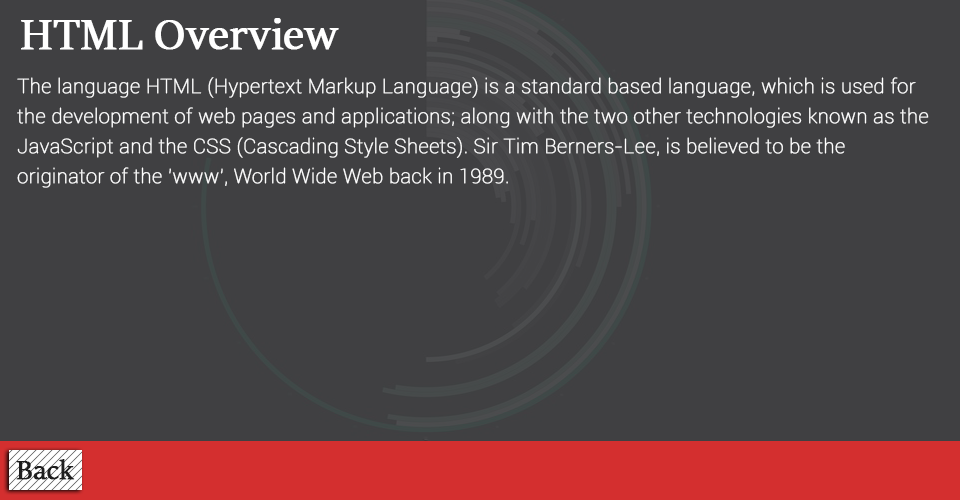
<style>
.page{position:relative;width:960px;height:500px;background:#404042}
.page>*{position:absolute;margin:0}
.t1{font:48px "SitkaBanner";color:#ffffff;font-weight:bold}
.t2{font:20px/30px "Roboto-Thin";color:#ffffff;font-weight:bold}
.t3{font:30px "SitkaBanner";color:#1e1e1e;font-weight:bold}
</style>
<div class="page">
<p class="t1" style="left:21px;top:18px;width:318px;height:32px">HTML Overview</p>
<p class="t2" style="left:17px;top:77px;width:912px;height:111px">The language HTML (Hypertext Markup Language) is a standard based language, which is used for the development of web pages and applications; along with the two other technologies known as the JavaScript and the CSS (Cascading Style Sheets). Sir Tim Berners-Lee, is believed to be the originator of the 'www', World Wide Web back in 1989.</p>
<p class="t3" style="left:16px;top:459px;width:59px;height:21px">Back</p>
</div>
